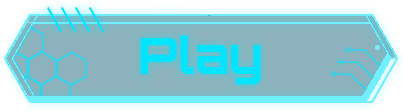
<style>
.page{position:relative;width:403px;height:112px;background:#8cb3bd}
.page>*{position:absolute;margin:0}
.t1{font:50px "Orbitron-ExtraBold";color:#00e4ff}
</style>
<div class="page">
<p class="t1" style="left:140px;top:35px;width:121px;height:50px">Play</p>
</div>
